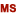
<style>
.page{position:relative;width:16px;height:16px;background:#ffffff}
.page>*{position:absolute;margin:0}
.t1{font:11px "Arial-BoldMT";color:#a40f00}
</style>
<div class="page">
<p class="t1" style="left:0px;top:4px;width:17px;height:9px">MS</p>
</div>
